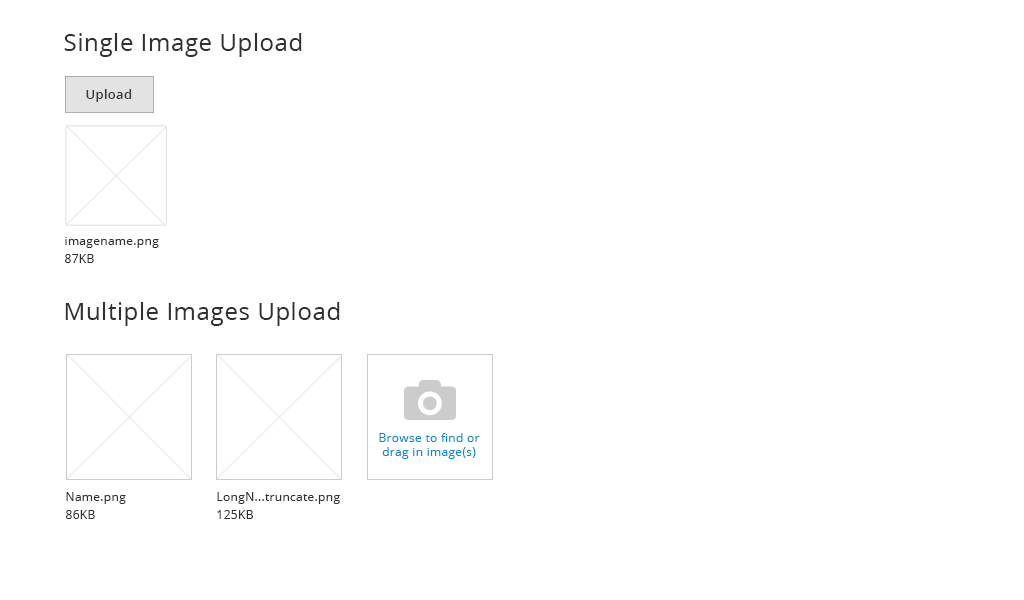
<style>
.page{position:relative;width:1024px;height:600px;background:#ffffff}
.page>*{position:absolute;margin:0}
.t1{font:24px "OpenSans";letter-spacing:0.025em;color:#303030}
.t2{font:13px "OpenSans-Semibold";letter-spacing:0.025em;color:#41362f}
.t3{font:12px/18px "OpenSans";letter-spacing:0.025em;color:#303030}
.t4{font:12px/52px "OpenSans";letter-spacing:0.025em;color:#008bdb}
.t5{font:12px/14px "OpenSans";letter-spacing:0.025em;color:#008bdb}
</style>
<div class="page">
<p class="t1" style="left:64px;top:33px;width:238px;height:24px">Single Image Upload</p>
<p class="t2" style="left:86px;top:89px;width:46px;height:13px">Upload</p>
<p class="t3" style="left:65px;top:237px;width:94px;height:26px">imagename.png<br>87KB</p>
<p class="t1" style="left:65px;top:302px;width:275px;height:24px">Multiple Images Upload</p>
<p class="t4" style="left:379px;top:433px;width:101px;height:26px;text-align:center">Browse to find or<br><span class="t5">drag in image(s)</span></p>
<p class="t3" style="left:66px;top:492px;width:60px;height:27px">Name.png<br>86KB</p>
<p class="t3" style="left:217px;top:492px;width:123px;height:27px">LongN...truncate.png<br>125KB</p>
</div>
